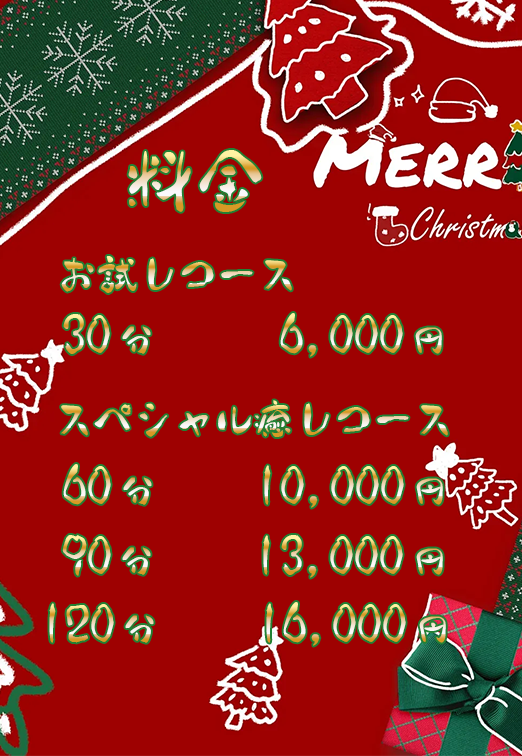
<style>
.page{position:relative;width:522px;height:756px;background:#9e0101}
.page>*{position:absolute;margin:0}
.t1{font:70.3px "Tenshin"}
.t2{font:40px "Tenshin"}
.t3{font:50px "Tenshin"}
.t4{font:34px "Tenshin"}
</style>
<div class="page">
<p class="t1" style="left:128px;top:150px;width:134px;height:62px">料金</p>
<p class="t2" style="left:61px;top:256px;width:231px;height:37px">お試しコース</p>
<p class="t3" style="left:63px;top:313px;width:379px;height:44px">30<span class="t4">分</span>  　 6,000<span class="t4">円</span></p>
<p class="t2" style="left:61px;top:400px;width:387px;height:37px">スペシャル癒しコース</p>
<p class="t3" style="left:63px;top:464px;width:380px;height:44px">60<span class="t4">分</span>　  10,000<span class="t4">円</span></p>
<p class="t3" style="left:62px;top:535px;width:381px;height:43px">90<span class="t4">分</span>　  13,000<span class="t4">円</span></p>
<p class="t3" style="left:49px;top:602px;width:397px;height:44px">120<span class="t4">分</span>    16,000<span class="t4">円</span></p>
</div>
